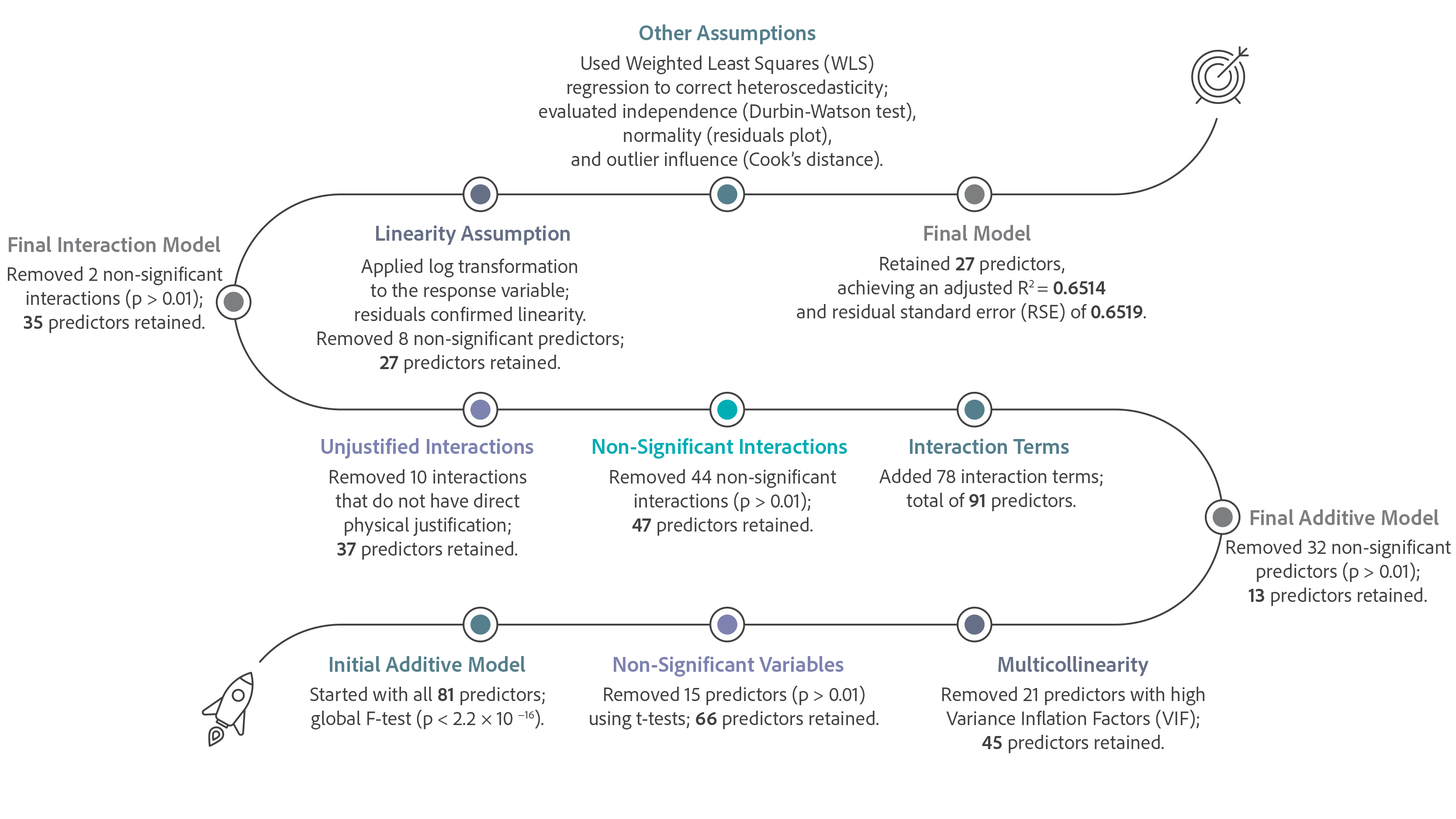
<style>
.page{position:relative;width:1456px;height:819px;background:#ffffff}
.page>*{position:absolute;margin:0}
.t1{font:21.8px "AdobeClean-Bold";color:#557f8c}
.t2{font:20px "AdobeClean-Regular";color:#414042}
.t3{font:21.8px "AdobeClean-Bold";color:#666f85}
.t4{font:21.8px "AdobeClean-Bold";color:#7c7e80}
.t5{font:20px "AdobeClean-Bold";color:#414042}
.t6{font:21.8px "AdobeClean-Bold";color:#7d82b0}
.t7{font:21.8px "AdobeClean-Bold";color:#00adb5}
</style>
<div class="page">
<p class="t1" style="left:639px;top:24px;width:177px;height:21px">Other Assumptions</p>
<p class="t2" style="left:539px;top:55px;width:376px;height:114px;text-align:center">Used Weighted Least Squares (WLS)<br>regression to correct heteroscedasticity;<br>evaluated independence (Durbin-Watson test),<br>normality (residuals plot),<br>and outlier influence (Cook’s distance).</p>
<p class="t3" style="left:376px;top:225px;width:194px;height:20px">Linearity Assumption</p>
<p class="t4" style="left:924px;top:225px;width:106px;height:16px">Final Model</p>
<p class="t4" style="left:9px;top:236px;width:211px;height:16px">Final Interaction Model</p>
<p class="t2" style="left:797px;top:256px;width:349px;height:66px;text-align:center">Retained <span class="t5">27</span> predictors,<br>achieving an adjusted R2 = <span class="t5">0.6514<br></span>and residual standard error (RSE) of <span class="t5">0.6519</span>.</p>
<p class="t2" style="left:8px;top:266px;width:214px;height:67px;text-align:center">Removed 2 non-significant<br>interactions (p &gt; 0.01);<br><span class="t5">35</span> predictors retained.</p>
<p class="t2" style="left:318px;top:259px;width:305px;height:114px;text-align:center">Applied log transformation<br>to the response variable;<br>residuals confirmed linearity.<br>Removed 8 non-significant predictors;<br><span class="t5">27</span> predictors retained.</p>
<p class="t6" style="left:321px;top:438px;width:212px;height:21px">Unjustified Interactions</p>
<p class="t7" style="left:593px;top:438px;width:254px;height:21px">Non-Significant Interactions</p>
<p class="t1" style="left:910px;top:439px;width:159px;height:15px">Interaction Terms</p>
<p class="t2" style="left:330px;top:469px;width:196px;height:91px;text-align:center">Removed 10 interactions<br>that do not have direct<br>physical justification;<br><span class="t5">37</span> predictors retained.</p>
<p class="t2" style="left:610px;top:469px;width:226px;height:67px;text-align:center">Removed 44 non-significant<br>interactions (p &gt; 0.01);<br><span class="t5">47</span> predictors retained.</p>
<p class="t2" style="left:879px;top:469px;width:224px;height:43px;text-align:center">Added 78 interaction terms;<br>total of <span class="t5">91</span> predictors.</p>
<p class="t4" style="left:1251px;top:509px;width:187px;height:16px">Final Additive Model</p>
<p class="t2" style="left:1227px;top:539px;width:224px;height:67px;text-align:center">Removed 32 non-significant<br>predictors (p &gt; 0.01);<br><span class="t5">13</span> predictors retained.</p>
<p class="t1" style="left:330px;top:656px;width:195px;height:16px">Initial Additive Model</p>
<p class="t6" style="left:614px;top:656px;width:229px;height:21px">Non-Significant Variables</p>
<p class="t3" style="left:998px;top:656px;width:150px;height:20px">Multicollinearity</p>
<p class="t2" style="left:310px;top:687px;width:235px;height:42px;text-align:center">Started with all <span class="t5">81</span> predictors;<br>global F-test (p &lt; 2.2 × 10 −16).</p>
<p class="t2" style="left:590px;top:686px;width:288px;height:43px;text-align:center">Removed 15 predictors (p &gt; 0.01)<br>using t-tests; <span class="t5">66</span> predictors retained.</p>
<p class="t2" style="left:942px;top:687px;width:262px;height:67px;text-align:center">Removed 21 predictors with high<br>Variance Inflation Factors (VIF);<br><span class="t5">45</span> predictors retained.</p>
</div>
